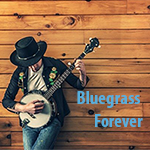
<style>
.page{position:relative;width:150px;height:150px}
.page>*{position:absolute;margin:0}
.t1{font:18.8px "MyriadPro-BoldCond";color:#58afdc}
</style>
<div class="page">
<p class="t1" style="left:77px;top:91px;width:66px;height:36px">Bluegrass<br>Forever</p>
</div>
